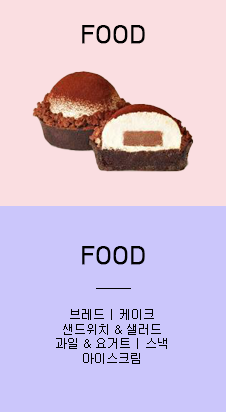
<style>
.page{position:relative;width:226px;height:412px;background:#cbc6fb}
.page>*{position:absolute;margin:0}
.t1{font:24px "HCRDotum";color:#000000;font-weight:bold}
.t2{font:12px "New-Gulim";color:#000000}
.t3{font:12px/120px "New-Gulim";color:#000000}
</style>
<div class="page">
<p class="t1" style="left:82px;top:25px;width:63px;height:19px">FOOD</p>
<p class="t1" style="left:82px;top:246px;width:63px;height:19px">FOOD</p>
<p class="t2" style="left:56px;top:309px;width:111px;height:55px;text-align:center"><span class="t3">브레드 | 케이크<br></span>샌드위치 &amp; 샐러드<br>과일 &amp; 요거트 | 스낵<br>아이스크림</p>
</div>
